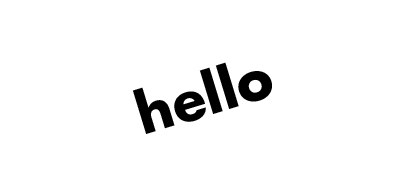
<style>
.page{position:relative;width:409px;height:195px;background:#ffffff}
.page>*{position:absolute;margin:0}
.t1{font:54.8px "FuturaLT-Bold";color:#000000}
</style>
<div class="page">
<p class="t1" style="left:132px;top:62px;width:140px;height:72px;rotate:-17deg">hello</p>
</div>
